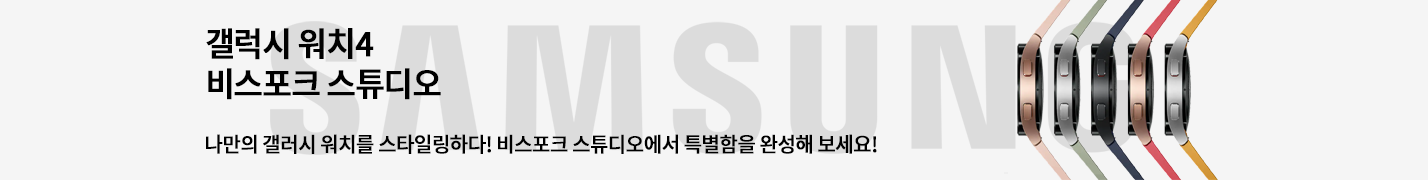
<style>
.page{position:relative;width:1428px;height:180px;background:#f5f5f5}
.page>*{position:absolute;margin:0}
.t1{font:33.6px/40px "NotoSansKR-Medium";letter-spacing:-0.05em;color:#000000;font-weight:bold;scale:0.95 1}
.t2{font:21px "NotoSansKR-Medium";letter-spacing:-0.05em;color:#000000;font-weight:bold;scale:0.95 1}
</style>
<div class="page">
<p class="t1" style="left:206px;top:28px;width:235px;height:72px">갤럭시 워치4<br>비스포크 스튜디오</p>
<p class="t2" style="left:206px;top:134px;width:671px;height:20px">나만의 갤러시 워치를 스타일링하다! 비스포크 스튜디오에서 특별함을 완성해 보세요!</p>
</div>
